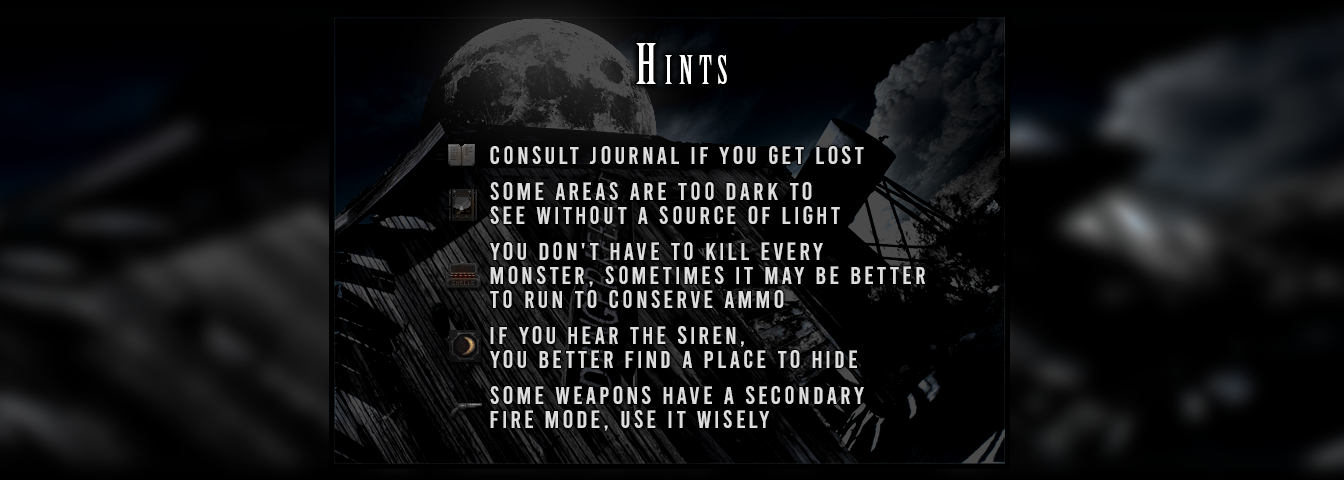
<style>
.page{position:relative;width:1344px;height:480px;background:#000000}
.page>*{position:absolute;margin:0}
.t1{font:55.2px "BirchStd";letter-spacing:0.16em;color:#ffffff;font-variant:small-caps}
.t2{font:24.8px/12px "Bebas-Regular";letter-spacing:0.12em;color:#dcdcdc}
</style>
<div class="page">
<p class="t1" style="left:636px;top:43px;width:91px;height:41px">Hints</p>
<p class="t2" style="left:490px;top:146px;width:435px;height:285px">Consult journal if you get lost<br><br><br>Some areas are too dark to <br><br>see without a source of light<br><br><br>You don't have to kill every <br><br>monster, sometimes it may be better <br><br>to run to conserve ammo<br><br><br>If you hear the siren, <br><br>you better find a place to hide<br><br><br>Some weapons have a secondary<br><br>fire mode, use it wisely</p>
</div>
